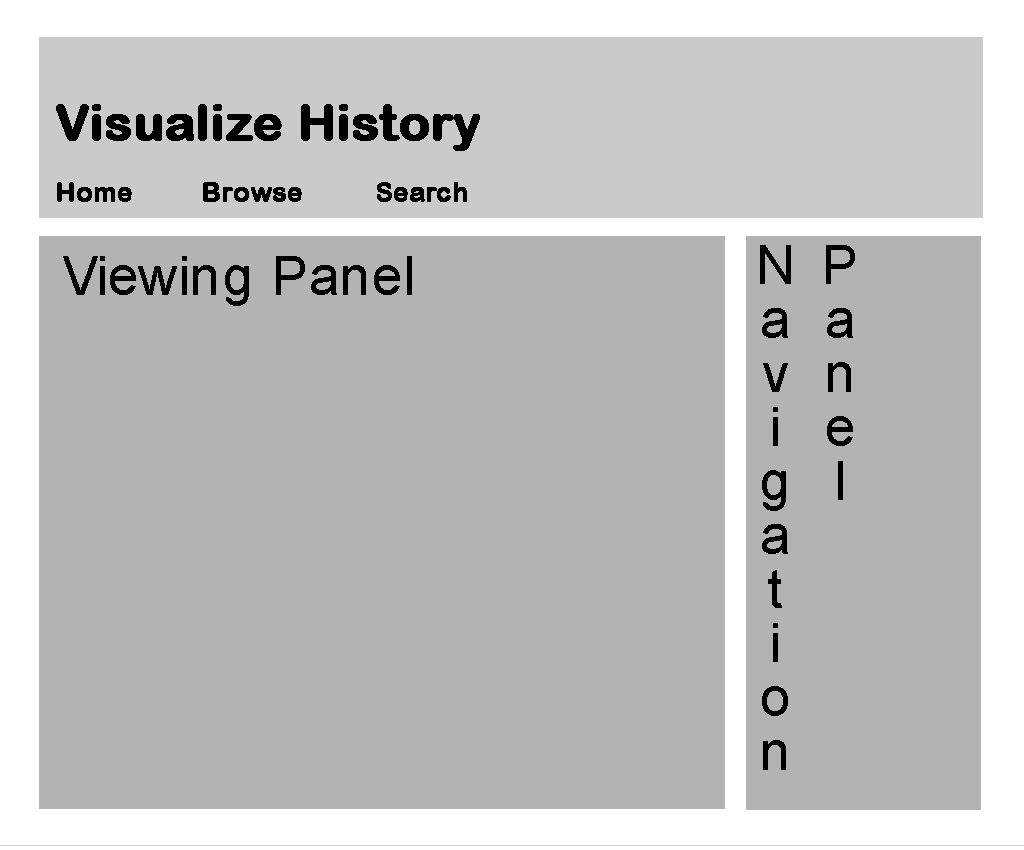
<style>
.page{position:relative;width:1024px;height:850px;background:#b3b3b3}
.page>*{position:absolute;margin:0}
.t1{font:50px "ArialRoundedMTBold";color:#000000;font-weight:bold}
.t2{font:26px "ArialRoundedMTBold";color:#000000;font-weight:bold}
.t3{font:54px "ArialMT";color:#000000}
</style>
<div class="page">
<p class="t1" style="left:56px;top:104px;width:424px;height:47px">Visualize History</p>
<p class="t2" style="left:57px;top:182px;width:75px;height:20px">Home</p>
<p class="t2" style="left:203px;top:182px;width:99px;height:20px">Browse</p>
<p class="t2" style="left:377px;top:182px;width:90px;height:20px">Search</p>
<p class="t3" style="left:760px;top:245px;width:95px;height:525px">Panel<br>Navigation</p>
<p class="t3" style="left:63px;top:256px;width:349px;height:50px">Viewing Panel</p>
</div>
